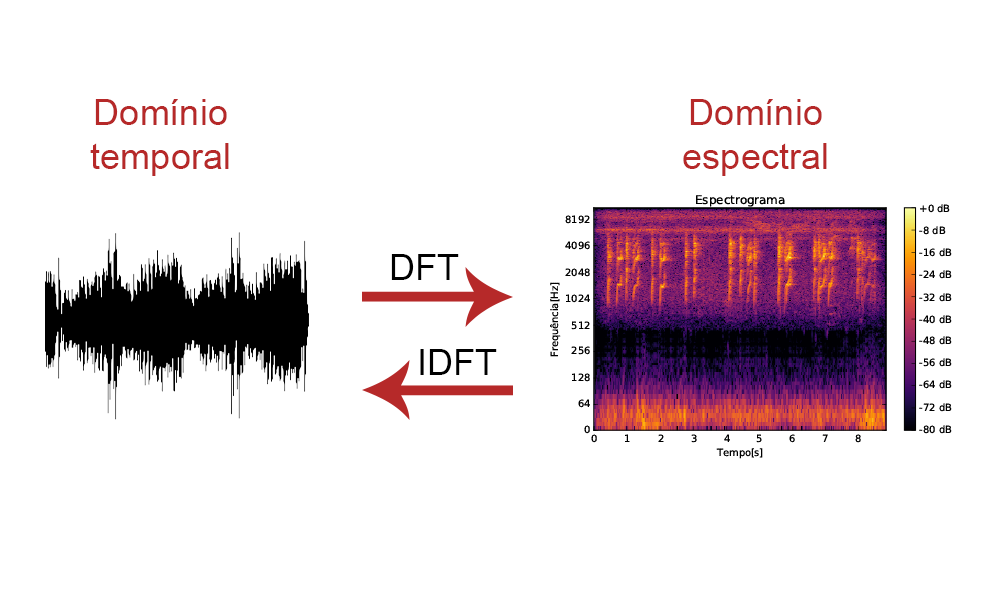
<style>
.page{position:relative;width:1000px;height:600px;background:#ffffff}
.page>*{position:absolute;margin:0}
.t1{font:36px "ArialMT";color:#b62929}
.t2{font:36px "ArialMT";color:#000000}
</style>
<div class="page">
<p class="t1" style="left:90px;top:99px;width:139px;height:77px;text-align:center">Domínio<br>temporal</p>
<p class="t1" style="left:683px;top:99px;width:144px;height:77px;text-align:center">Domínio<br>espectral</p>
<p class="t2" style="left:391px;top:254px;width:68px;height:26px">DFT</p>
<p class="t2" style="left:420px;top:349px;width:77px;height:26px">IDFT</p>
</div>
